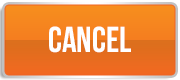
<style>
.page{position:relative;width:180px;height:80px}
.page>*{position:absolute;margin:0}
.t1{font:36px "UTM-Bebas";color:#ffffff}
</style>
<div class="page">
<p class="t1" style="left:49px;top:26px;width:82px;height:27px">cancel</p>
</div>
